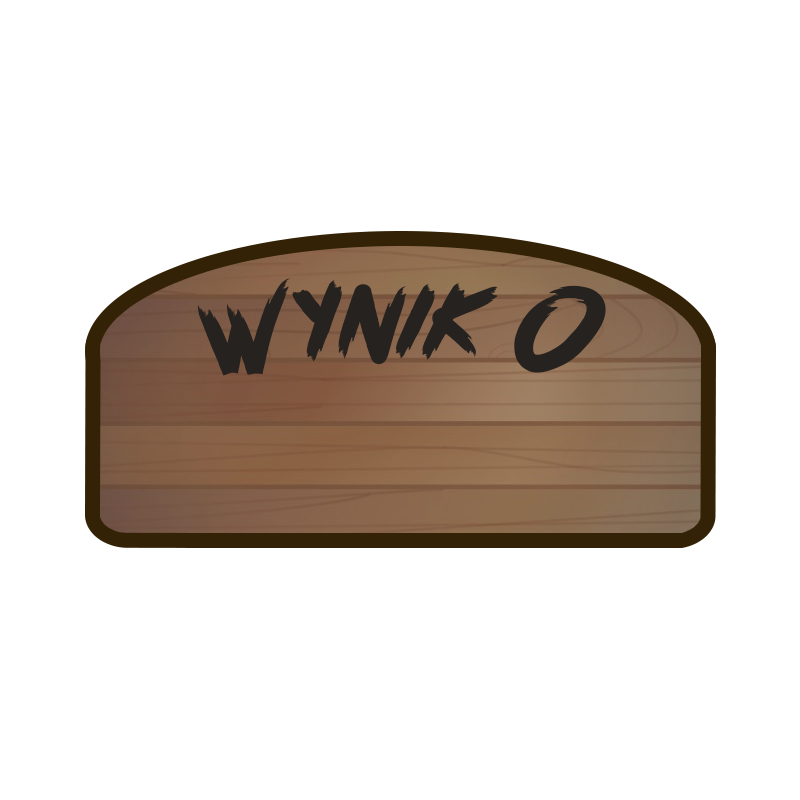
<style>
.page{position:relative;width:800px;height:800px;background:#ffffff}
.page>*{position:absolute;margin:0}
.t1{font:119.5px "PinkBlue";color:#25221f}
.t2{font:141.7px "PinkBlue";color:#25221f}
</style>
<div class="page">
<p class="t1" style="left:197px;top:278px;width:409px;height:98px;rotate:1deg">wynik <span class="t2">o</span></p>
</div>
